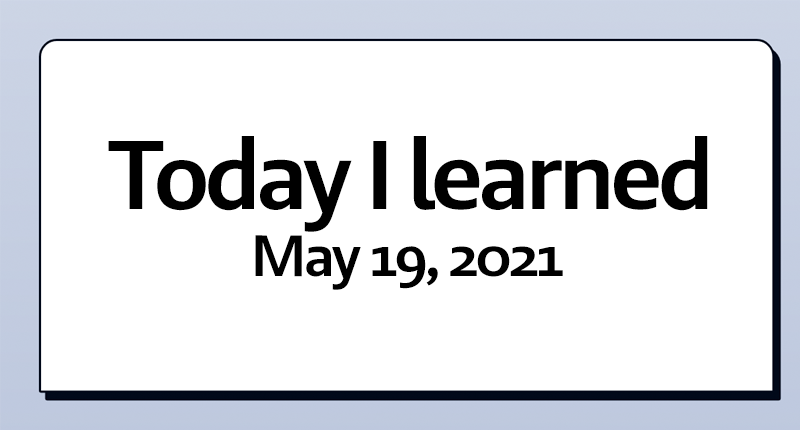
<style>
.page{position:relative;width:800px;height:430px;background:#ffffff}
.page>*{position:absolute;margin:0}
.t1{font:100px "BrandoSansSemiBold";letter-spacing:-0.05em;color:#000000}
.t2{font:60px "BrandoSansSemiBold";letter-spacing:-0.05em;color:#000000}
</style>
<div class="page">
<p class="t1" style="left:108px;top:136px;width:600px;height:96px">Today I learned</p>
<p class="t2" style="left:255px;top:235px;width:308px;height:55px">May 19, 2021</p>
</div>
